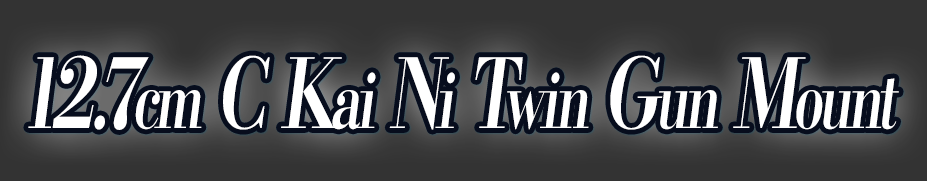
<style>
.page{position:relative;width:927px;height:181px;background:#333333}
.page>*{position:absolute;margin:0}
.t1{font:96px "KochoStd-Heavy";letter-spacing:-0.08em;color:#ffffff;font-style:italic;scale:0.72 1}
.t2{font:76.8px "KochoStd-Heavy";letter-spacing:-0.08em;color:#ffffff;font-style:italic;scale:0.72 1}
</style>
<div class="page">
<p class="t1" style="left:28px;top:55px;width:871px;height:75px">12.7<span class="t2">cm</span> C K<span class="t2">ai</span> N<span class="t2">i</span> T<span class="t2">win</span> G<span class="t2">un</span> M<span class="t2">ount</span></p>
</div>
